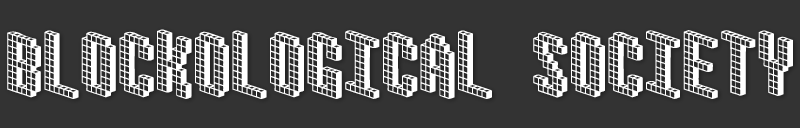
<style>
.page{position:relative;width:800px;height:128px;background:#333333}
.page>*{position:absolute;margin:0}
.t1{font:72px "Blox-(BRK";letter-spacing:0.025em;color:#ffffff}
</style>
<div class="page">
<p class="t1" style="left:7px;top:29px;width:786px;height:70px">BLOCKOLOGICAL SOCIETY</p>
</div>
